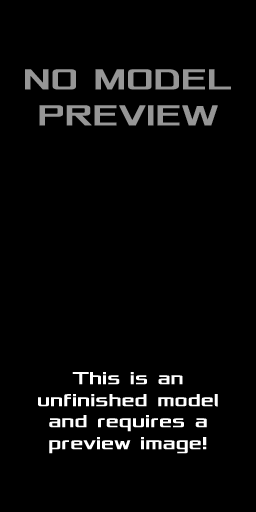
<style>
.page{position:relative;width:256px;height:512px;background:#000000}
.page>*{position:absolute;margin:0}
.t1{font:18px "Xolonium";font-weight:bold}
.t2{font:24px "Xolonium";font-weight:bold}
.t3{font:30px "Xolonium";font-weight:bold}
.t4{font:18px "Xolonium";color:#ffffff;font-weight:bold}
.t5{font:24px "Xolonium";color:#c8e1ff;font-weight:bold}
.t6{font:30px "Xolonium";color:#969696;font-weight:bold}
</style>
<div class="page">
<p class="t1" style="left:25px;top:69px;width:206px;height:385px;text-align:center"><span class="t2"><br><br></span><span class="t3">NO MODEL<br>PREVIEW<br><br><br><br><br><br><br><br><br><br><br><br></span>This is an unfinished model  and requires a preview image!</p>
<p class="t1" style="left:25px;top:69px;width:206px;height:385px;text-align:center"><span class="t2"><br><br></span><span class="t3">NO MODEL<br>PREVIEW<br><br><br><br><br><br><br><br><br><br><br><br></span>This is an unfinished model  and requires a preview image!</p>
<p class="t4" style="left:25px;top:69px;width:206px;height:385px;text-align:center"><span class="t5"><br><br></span><span class="t6">NO MODEL<br>PREVIEW<br><br><br><br><br><br><br><br><br><br><br><br></span>This is an unfinished model  and requires a preview image!</p>
</div>
